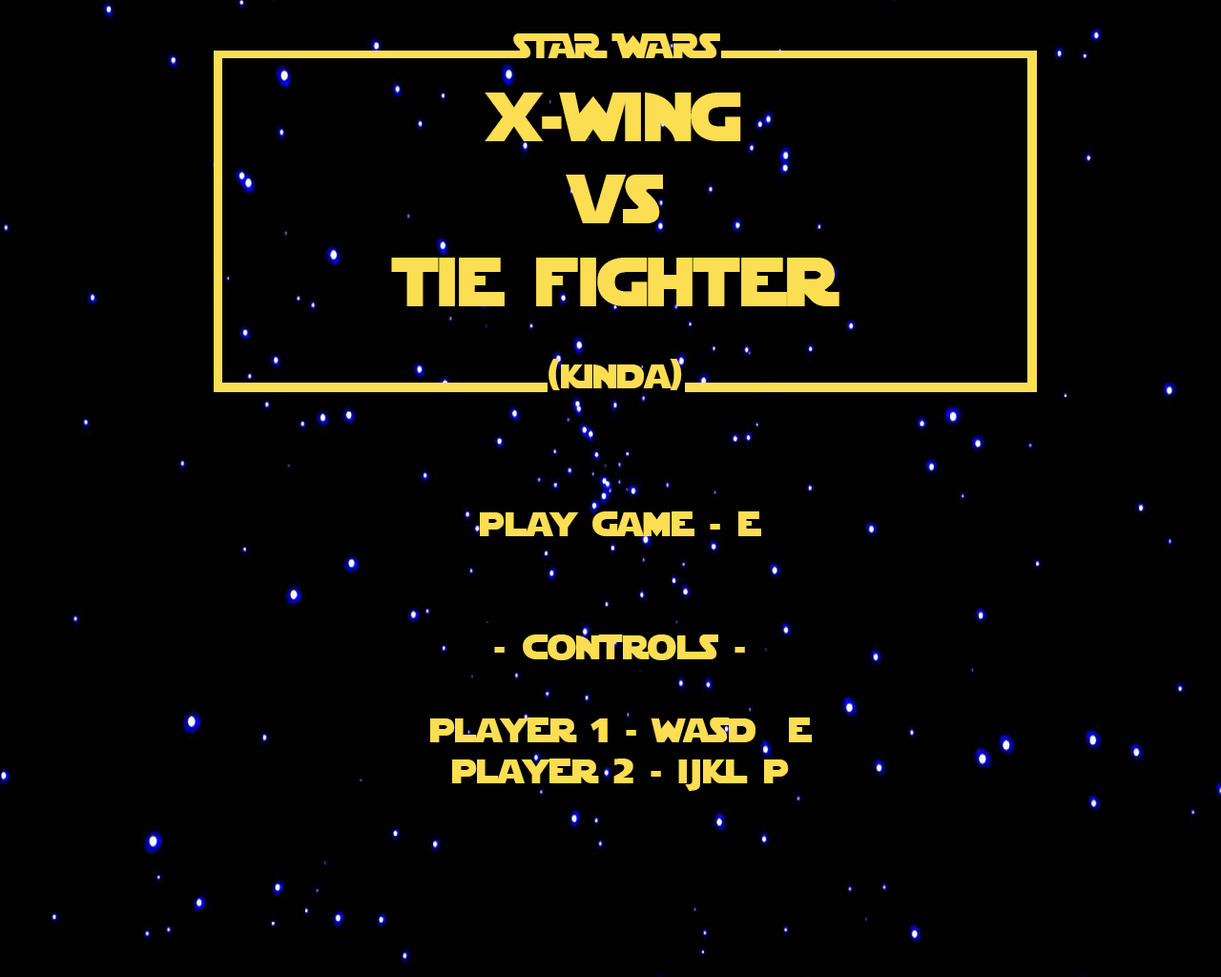
<style>
.page{position:relative;width:1221px;height:977px;background:#010101}
.page>*{position:absolute;margin:0}
.t1{font:68.7px "StarJediSpecialEdition";color:#fcde53}
.t2{font:34.3px "StarJediSpecialEdition";color:#fcde53}
</style>
<div class="page">
<p class="t1" style="left:391px;top:33px;width:448px;height:357px;text-align:center"><span class="t2">STAR WARS<br></span>x-wing <br>vs <br>tie fighter<span class="t2"><br><br>(kinda)</span></p>
<p class="t2" style="left:430px;top:511px;width:382px;height:280px;text-align:center">play game - e<br><br><br>- controls - <br><br>player 1 - wasd  e<br>player 2 - ijkl p</p>
</div>
